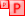
<style>
.page{position:relative;width:25px;height:25px;background:#ffffff}
.page>*{position:absolute;margin:0}
.t1{font:6px "MyriadPro-Regular"}
.t2{font:14px "MyriadPro-Regular";color:#ff0000}
</style>
<div class="page">
<p class="t1" style="left:3px;top:2px;width:3px;height:5px">P</p>
<p class="t2" style="left:14px;top:3px;width:7px;height:10px">P</p>
</div>
